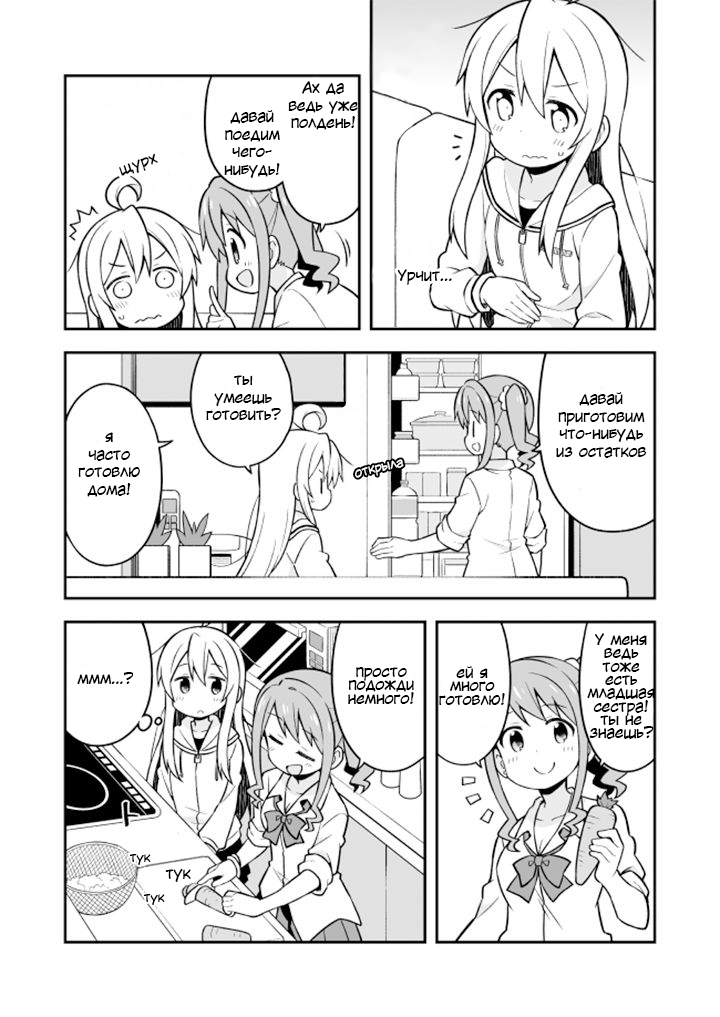
<style>
.page{position:relative;width:720px;height:1017px;background:#ffffff}
.page>*{position:absolute;margin:0}
.t1{font:14.7px "KuraiVoice2";color:#000000}
.t2{font:12px "KuraiVoice2";color:#ffffff}
.t3{font:14.7px/13.3px "KuraiVoice2";color:#000000}
.t4{font:12px "KuraiVoice2";color:#000000}
</style>
<div class="page">
<p class="t1" style="left:288px;top:81px;width:70px;height:49px;text-align:center">Ах да<br>ведь уже<br>полдень!</p>
<p class="t1" style="left:224px;top:110px;width:56px;height:68px;text-align:center">давай<br>поедим<br>чего-<br>нибудь!</p>
<p class="t1" style="left:119px;top:153px;width:39px;height:23px;rotate:-20deg">щурх</p>
<p class="t1" style="left:397px;top:269px;width:55px;height:16px">Урчит...</p>
<p class="t1" style="left:206px;top:375px;width:75px;height:46px;text-align:center">ты<br>умеешь<br>готовить?</p>
<p class="t1" style="left:556px;top:392px;width:91px;height:66px;text-align:center">давай<br>приготовим<br>что-нибудь<br>из остатков</p>
<p class="t1" style="left:78px;top:432px;width:62px;height:65px;text-align:center">я<br>часто<br>готовлю<br>дома!</p>
<p class="t2" style="left:355px;top:459px;width:49px;height:19px;rotate:-13deg">открыла</p>
<p class="t3" style="left:587px;top:633px;width:68px;height:106px;text-align:center">У меня<br>ведь<br>тоже<br>есть<br>младшая<br>сестра!<br>ты не<br>знаешь?</p>
<p class="t1" style="left:77px;top:672px;width:56px;height:12px">ммм...?</p>
<p class="t3" style="left:348px;top:667px;width:66px;height:37px;text-align:center">просто<br>подожди<br>немного!</p>
<p class="t3" style="left:439px;top:666px;width:66px;height:39px;text-align:center">ей я<br>много<br>готовлю!</p>
<p class="t4" style="left:129px;top:854px;width:22px;height:11px">тук</p>
<p class="t1" style="left:165px;top:869px;width:26px;height:13px">тук</p>
<p class="t4" style="left:143px;top:894px;width:22px;height:11px">тук</p>
</div>
